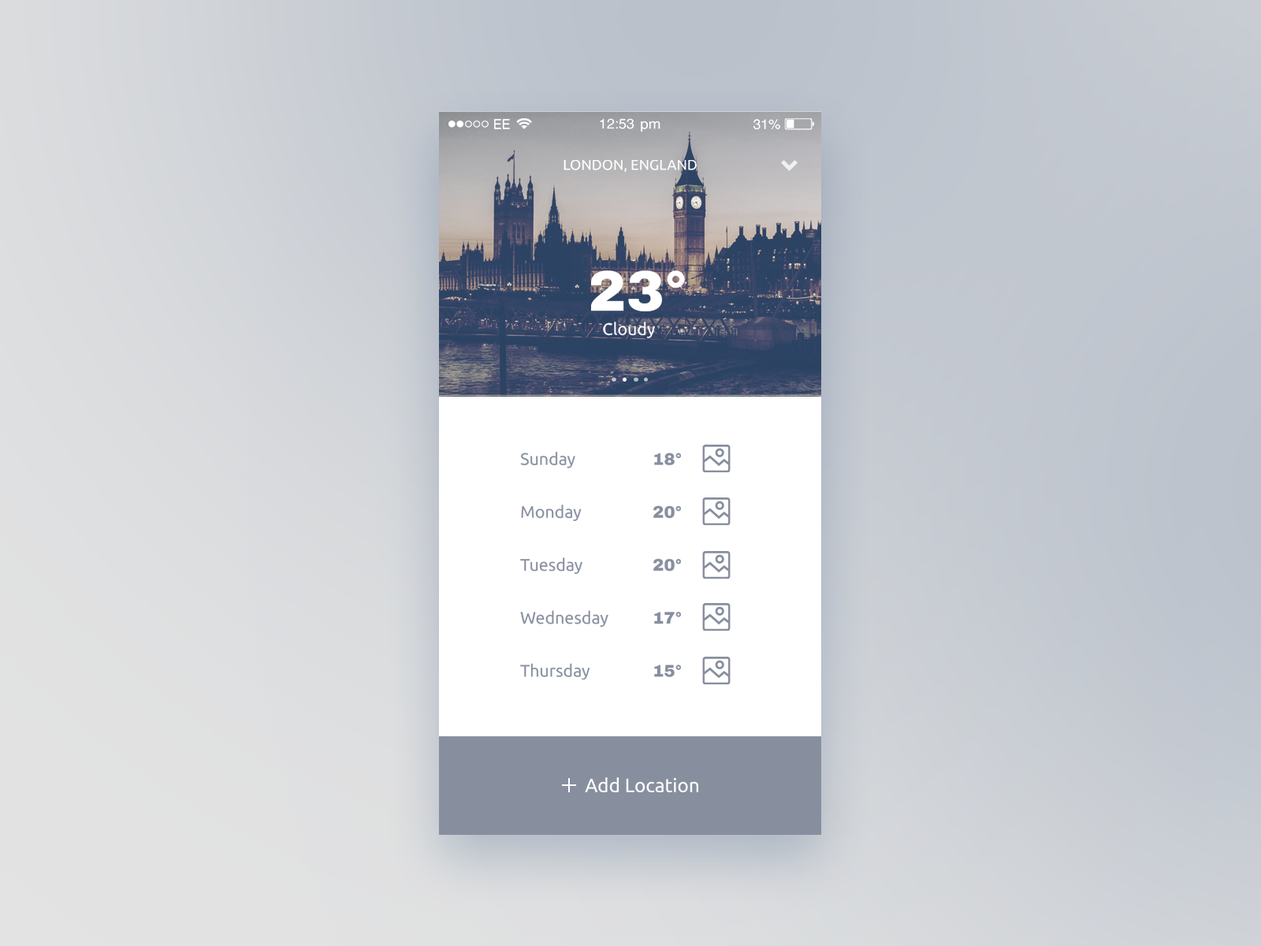
<style>
.page{position:relative;width:1261px;height:946px}
.page>*{position:absolute;margin:0}
.t1{font:14.4px "Ubuntu";color:#ffffff;text-transform:uppercase}
.t2{font:57.3px "ArchivoBlack-Regular";color:#ffffff}
.t3{font:16.8px "Ubuntu";color:#ffffff}
.t4{font:16.8px/52.9px "Ubuntu";color:#878f9f}
.t5{font:16.8px/52.9px "ArchivoBlack-Regular";color:#878f9f}
.t6{font:19.2px "Ubuntu";color:#ffffff}
</style>
<div class="page">
<p class="t1" style="left:563px;top:160px;width:134px;height:12px">London, England</p>
<p class="t2" style="left:591px;top:270px;width:94px;height:41px">23°</p>
<p class="t3" style="left:603px;top:322px;width:52px;height:16px">Cloudy</p>
<p class="t4" style="left:520px;top:452px;width:88px;height:227px">Sunday<br>Monday<br>Tuesday<br>Wednesday<br>Thursday</p>
<p class="t5" style="left:653px;top:452px;width:28px;height:225px">18°<br>20°<br>20°<br>17°<br>15°</p>
<p class="t6" style="left:585px;top:777px;width:113px;height:15px">Add Location</p>
</div>
